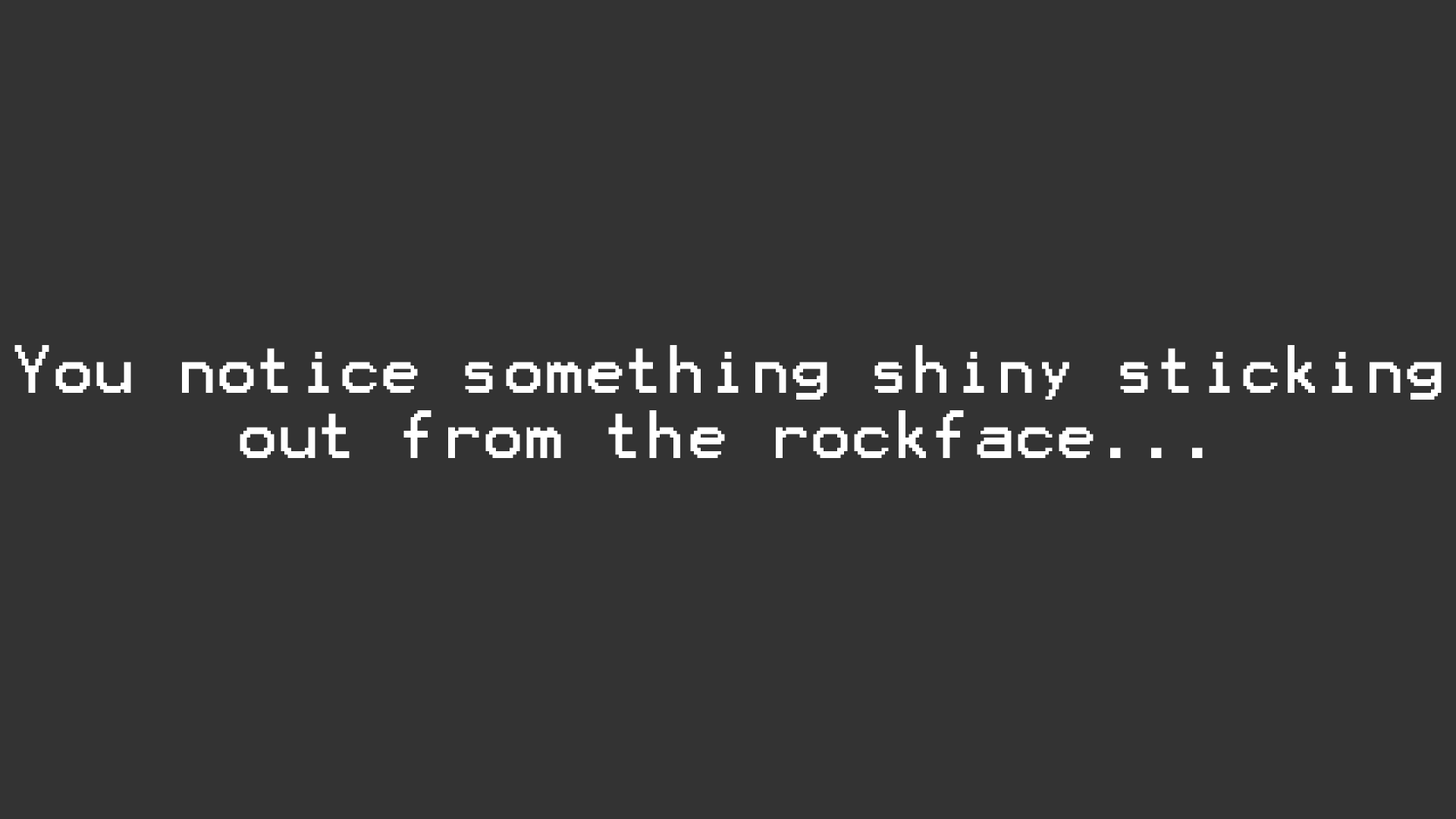
<style>
.page{position:relative;width:1456px;height:819px;background:#333333}
.page>*{position:absolute;margin:0}
.t1{font:54.6px "Terminal";color:#ffffff}
</style>
<div class="page">
<p class="t1" style="left:14px;top:345px;width:1428px;height:113px;text-align:center">You notice something shiny sticking<br>out from the rockface...</p>
</div>
